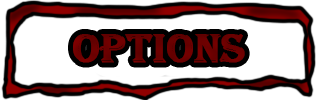
<style>
.page{position:relative;width:320px;height:100px;background:#ffffff}
.page>*{position:absolute;margin:0}
.t1{font:41.5px "Algerian";color:#6a0000;font-weight:bold}
</style>
<div class="page">
<p class="t1" style="left:73px;top:34px;width:172px;height:29px">options</p>
</div>
